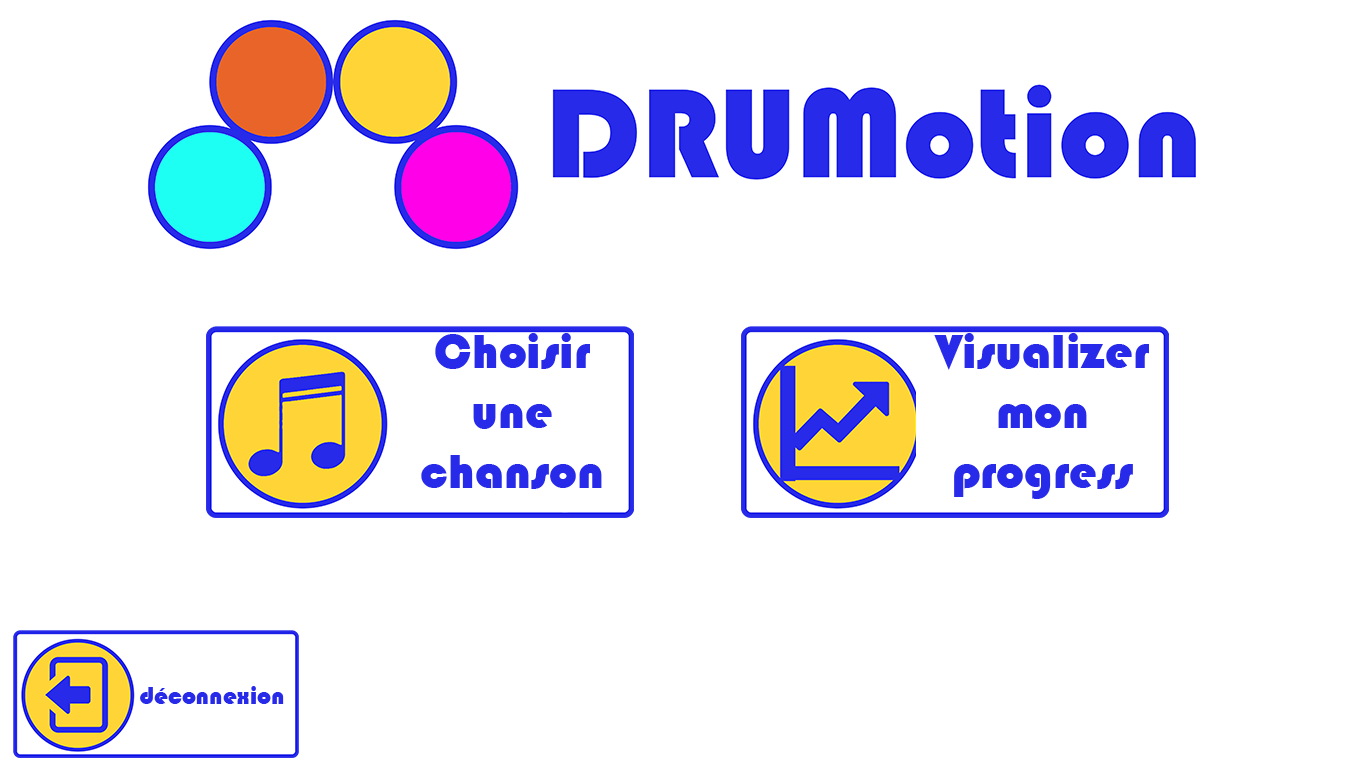
<style>
.page{position:relative;width:1366px;height:768px;background:#ffffff}
.page>*{position:absolute;margin:0}
.t1{font:50px "Bauhaus93";color:#272ae8}
.t2{font:25px "Bauhaus93";color:#272ae8}
</style>
<div class="page">
<p class="t1" style="left:421px;top:333px;width:181px;height:156px;text-align:center">Choisir une chanson</p>
<p class="t1" style="left:934px;top:333px;width:215px;height:166px;text-align:center">Visualizer mon progress</p>
<p class="t2" style="left:140px;top:686px;width:144px;height:18px">déconnexion</p>
</div>
